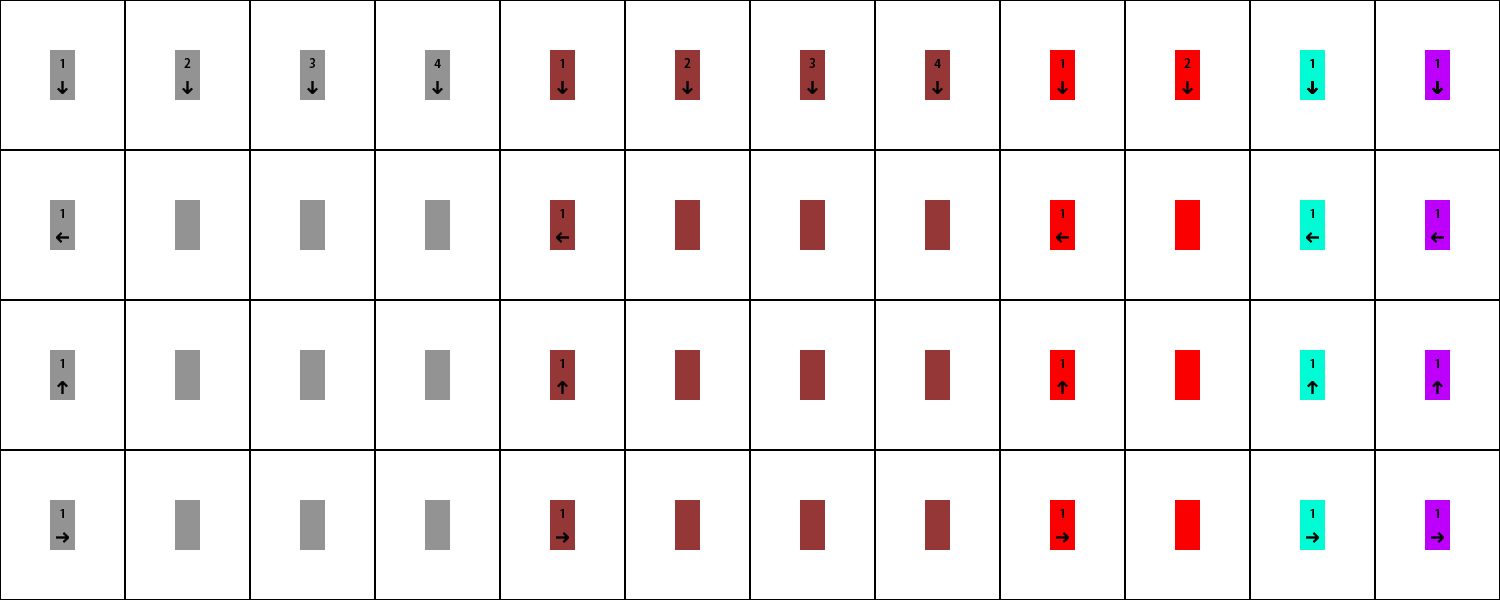
<style>
.page{position:relative;width:1500px;height:600px;background:#ffffff}
.page>*{position:absolute;margin:0}
.t1{font:12px "KozGoPr6N-Bold";color:#000000}
</style>
<div class="page">
<p class="t1" style="left:60px;top:59px;width:4px;height:9px">1</p>
<p class="t1" style="left:184px;top:58px;width:7px;height:10px">2</p>
<p class="t1" style="left:309px;top:58px;width:6px;height:10px">3</p>
<p class="t1" style="left:434px;top:59px;width:7px;height:9px">4</p>
<p class="t1" style="left:560px;top:59px;width:4px;height:9px">1</p>
<p class="t1" style="left:684px;top:58px;width:7px;height:10px">2</p>
<p class="t1" style="left:809px;top:58px;width:6px;height:10px">3</p>
<p class="t1" style="left:934px;top:59px;width:7px;height:9px">4</p>
<p class="t1" style="left:1060px;top:59px;width:4px;height:9px">1</p>
<p class="t1" style="left:1184px;top:58px;width:7px;height:10px">2</p>
<p class="t1" style="left:1310px;top:59px;width:4px;height:9px">1</p>
<p class="t1" style="left:1310px;top:59px;width:4px;height:9px">1</p>
<p class="t1" style="left:1435px;top:59px;width:4px;height:9px">1</p>
<p class="t1" style="left:1435px;top:59px;width:4px;height:9px">1</p>
<p class="t1" style="left:60px;top:209px;width:4px;height:9px">1</p>
<p class="t1" style="left:560px;top:209px;width:4px;height:9px">1</p>
<p class="t1" style="left:1060px;top:209px;width:4px;height:9px">1</p>
<p class="t1" style="left:1310px;top:209px;width:4px;height:9px">1</p>
<p class="t1" style="left:1435px;top:209px;width:4px;height:9px">1</p>
<p class="t1" style="left:60px;top:359px;width:4px;height:9px">1</p>
<p class="t1" style="left:560px;top:359px;width:4px;height:9px">1</p>
<p class="t1" style="left:1060px;top:359px;width:4px;height:9px">1</p>
<p class="t1" style="left:1310px;top:359px;width:4px;height:9px">1</p>
<p class="t1" style="left:1435px;top:359px;width:4px;height:9px">1</p>
<p class="t1" style="left:60px;top:509px;width:4px;height:9px">1</p>
<p class="t1" style="left:560px;top:509px;width:4px;height:9px">1</p>
<p class="t1" style="left:1060px;top:509px;width:4px;height:9px">1</p>
<p class="t1" style="left:1310px;top:509px;width:4px;height:9px">1</p>
<p class="t1" style="left:1435px;top:509px;width:4px;height:9px">1</p>
</div>
